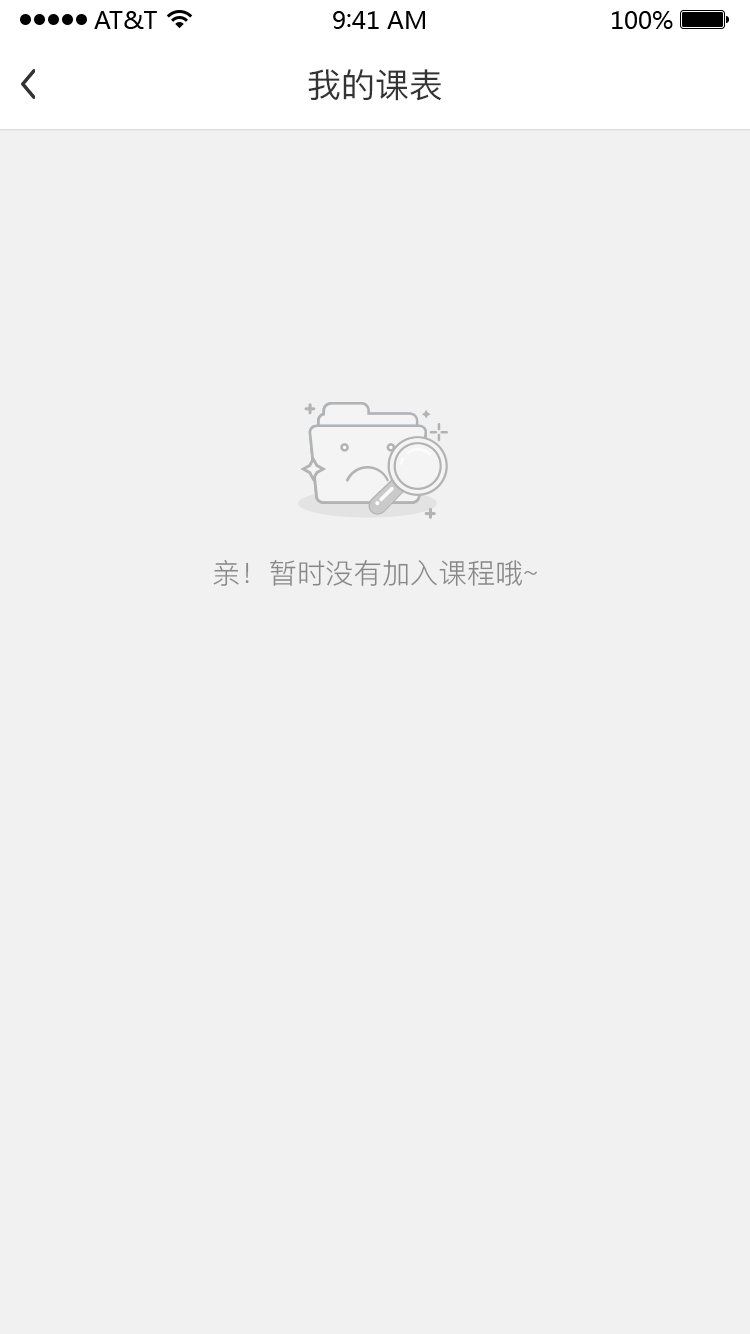
<style>
.page{position:relative;width:750px;height:1334px;background:#f1f1f1}
.page>*{position:absolute;margin:0}
.t1{font:34px "PingFang-SC-Medium";color:#333333}
.t2{font:28px "PingFang-SC-Regular";color:#888888}
</style>
<div class="page">
<p class="t1" style="left:308px;top:69px;width:133px;height:32px">我的课表</p>
<p class="t2" style="left:213px;top:560px;width:324px;height:26px">亲！暂时没有加入课程哦~</p>
</div>
